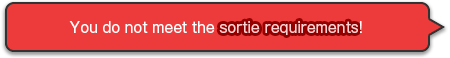
<style>
.page{position:relative;width:450px;height:58px;background:#ed3b3b}
.page>*{position:absolute;margin:0}
.t1{font:14px "GothicMB101Pro-Regular";color:#ffffff}
.t2{font:14px "GothicMB101Pro-Regular";color:#ffd3d3}
</style>
<div class="page">
<p class="t1" style="left:69px;top:21px;width:293px;height:14px">You do not meet the <span class="t2">sortie requirements</span>!</p>
<p class="t1" style="left:69px;top:21px;width:293px;height:14px">You do not meet the <span class="t2">sortie requirements</span>!</p>
</div>
